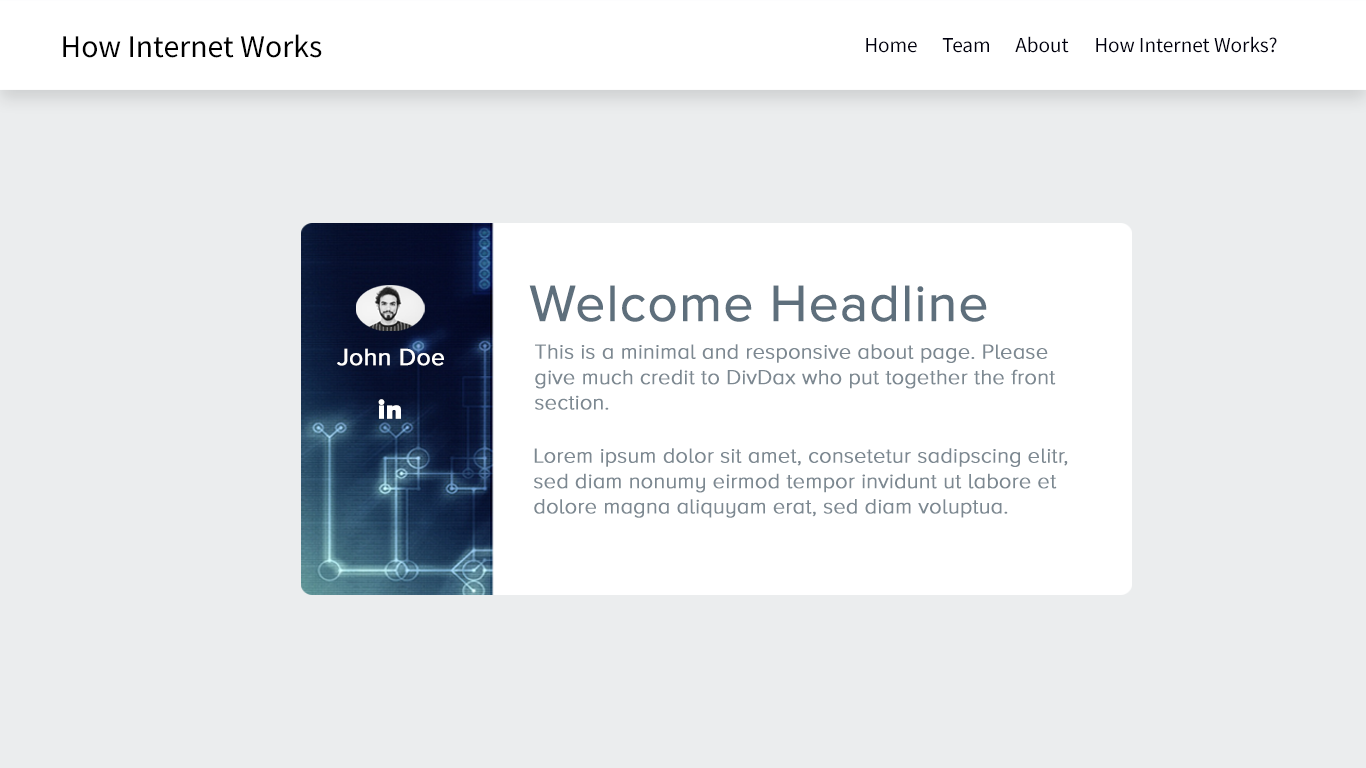
<style>
.page{position:relative;width:1366px;height:768px;background:#ebedee}
.page>*{position:absolute;margin:0}
.t1{font:31.8px "SourceSansPro-Regular";color:#000000}
.t2{font:21.2px "SourceSansPro-Regular";color:#00000e}
.t3{font:52.9px "ProximaNova-Regular";color:#5e6f7c;font-weight:bold}
.t4{font:24.2px "ProximaNova-Regular";color:#ffffff;font-weight:bold}
.t5{font:21.2px "ProximaNovaA-Light";color:#7c8891;font-weight:bold}
.t6{font:26.5px "ProximaNova-Black";color:#ffffff;font-weight:bold}
</style>
<div class="page">
<p class="t1" style="left:63px;top:34px;width:259px;height:24px">How Internet Works</p>
<p class="t2" style="left:866px;top:38px;width:51px;height:15px">Home</p>
<p class="t2" style="left:942px;top:38px;width:47px;height:15px">Team</p>
<p class="t2" style="left:1015px;top:36px;width:54px;height:17px">About</p>
<p class="t2" style="left:1096px;top:36px;width:181px;height:17px">How Internet Works?</p>
<p class="t3" style="left:529px;top:285px;width:458px;height:37px">Welcome Headline</p>
<p class="t4" style="left:337px;top:348px;width:107px;height:18px">John Doe</p>
<p class="t5" style="left:535px;top:344px;width:521px;height:66px">This is a minimal and responsive about page. Please <br>give much credit to DivDax who put together the front<br>section.</p>
<p class="t6" style="left:378px;top:399px;width:23px;height:20px">in</p>
<p class="t5" style="left:534px;top:448px;width:534px;height:70px">Lorem ipsum dolor sit amet, consetetur sadipscing elitr,<br>sed diam nonumy eirmod tempor invidunt ut labore et <br>dolore magna aliquyam erat, sed diam voluptua.</p>
</div>
